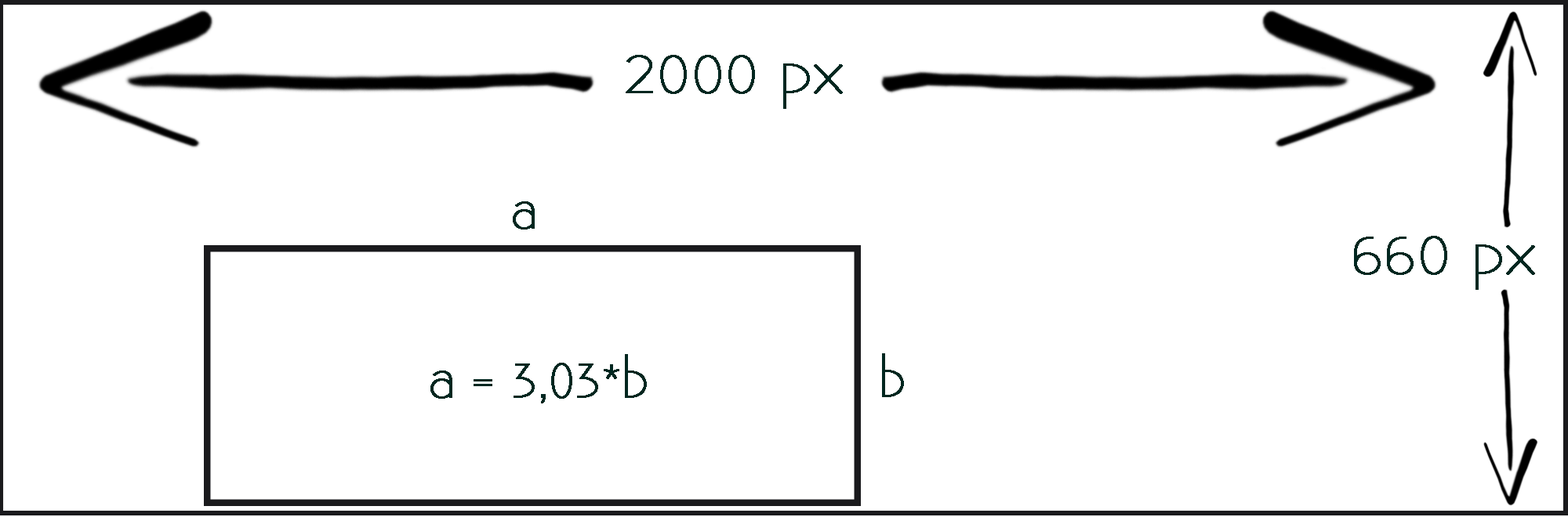
<style>
.page{position:relative;width:1568px;height:517px;background:#ffffff}
.page>*{position:absolute;margin:0}
.t1{font:52.2px "Existence-Light";letter-spacing:-0.005em;color:#002720;font-weight:bold;scale:1.16 1}
.t2{font:48.4px "Existence-Light";letter-spacing:-0.005em;color:#002720;font-weight:bold}
</style>
<div class="page">
<p class="t1" style="left:626px;top:55px;width:217px;height:54px">2000 px</p>
<p class="t2" style="left:513px;top:201px;width:22px;height:29px">a</p>
<p class="t1" style="left:1354px;top:236px;width:181px;height:54px">660 px</p>
<p class="t2" style="left:882px;top:354px;width:22px;height:43px">b</p>
<p class="t2" style="left:430px;top:354px;width:217px;height:50px">a = 3,03*b</p>
</div>
